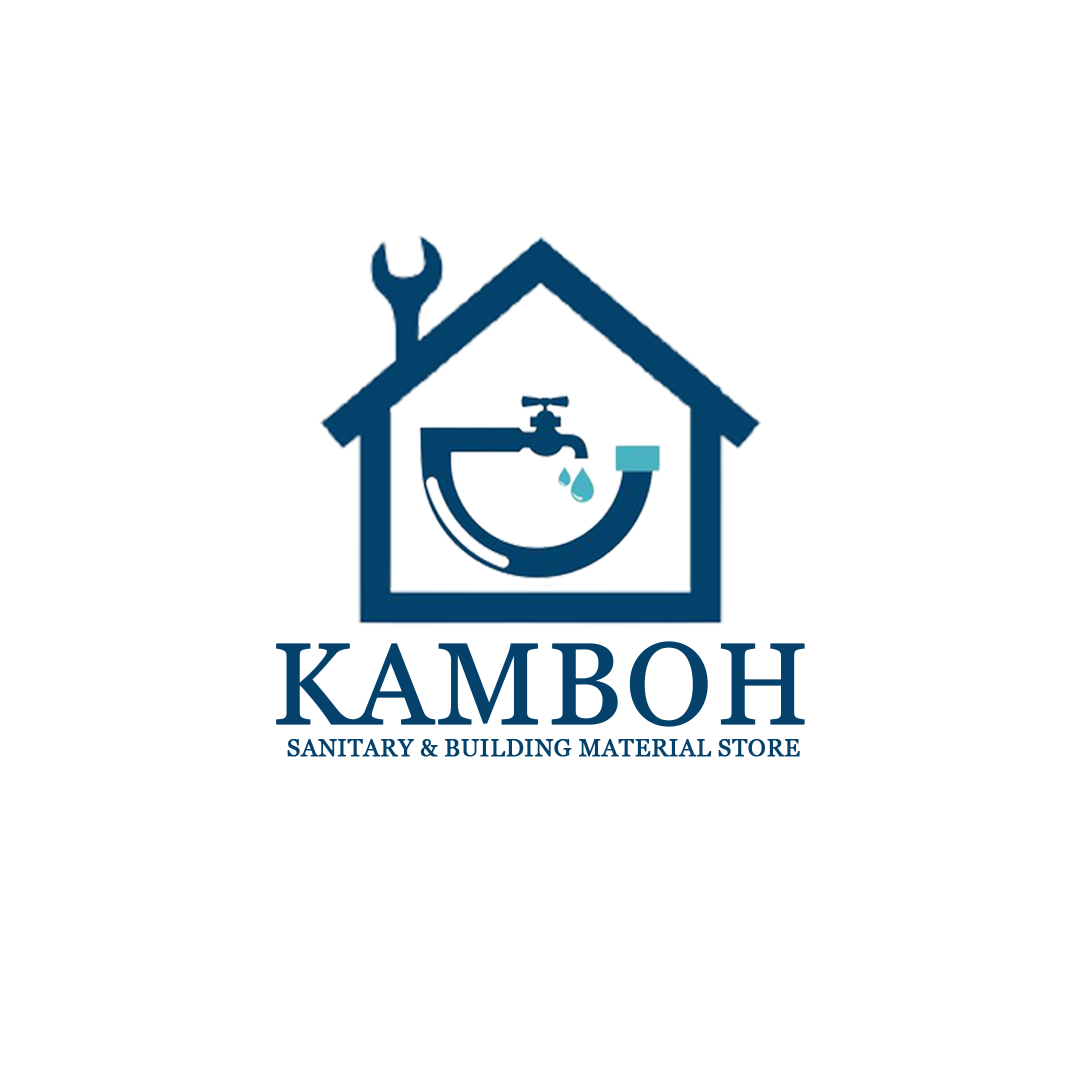
<style>
.page{position:relative;width:1080px;height:1080px;background:#ffffff}
.page>*{position:absolute;margin:0}
.t1{font:115px "Georgia";color:#04426c;text-transform:uppercase;font-weight:bold}
.t2{font:24px "Georgia";color:#04426c;text-transform:uppercase;font-weight:bold}
</style>
<div class="page">
<p class="t1" style="left:276px;top:641px;width:529px;height:86px">Kamboh</p>
<p class="t2" style="left:287px;top:739px;width:513px;height:18px">Sanitary &amp; Building Material Store</p>
</div>
